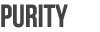
<style>
.page{position:relative;width:100px;height:32px;background:#ffffff}
.page>*{position:absolute;margin:0}
.t1{font:32px "BebasNeue";color:#444444;text-transform:uppercase}
</style>
<div class="page">
<p class="t1" style="left:1px;top:4px;width:67px;height:24px">Purity</p>
</div>
